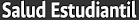
<style>
.page{position:relative;width:139px;height:20px;background:#fcfcfc}
.page>*{position:absolute;margin:0}
.t1{font:23.6px "AncizarSans-Bold";color:#fcfcfc;scale:0.84 1}
</style>
<div class="page">
<p class="t1" style="left:2px;top:0px;width:135px;height:18px">Salud Estudiantil</p>
</div>
